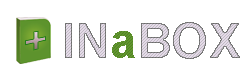
<style>
.page{position:relative;width:250px;height:80px;background:#ffffff}
.page>*{position:absolute;margin:0}
.t1{font:48px "Arial-BoldMT"}
.t2{font:48px "Arial-BoldMT";color:#61972e}
</style>
<div class="page">
<p class="t1" style="left:65px;top:22px;width:175px;height:37px">IN  BOX</p>
<p class="t2" style="left:112px;top:31px;width:23px;height:27px">a</p>
</div>
